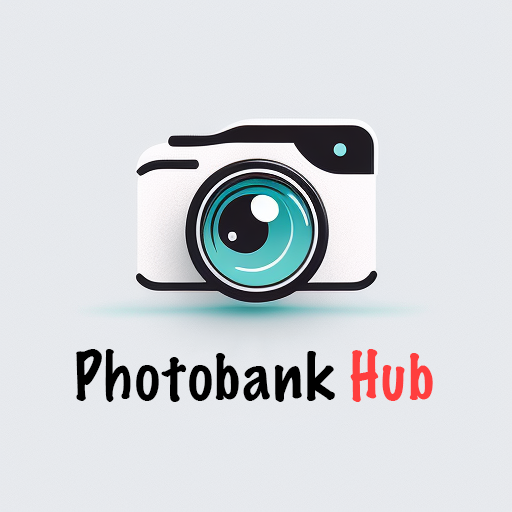
<style>
.page{position:relative;width:512px;height:512px}
.page>*{position:absolute;margin:0}
.t1{font:60px "MarkerFelt-Thin";color:#000000}
.t2{font:60px "MarkerFelt-Thin";color:#ff3e3e}
</style>
<div class="page">
<p class="t1" style="left:76px;top:349px;width:357px;height:53px">Photobank <span class="t2">Hub</span></p>
</div>
